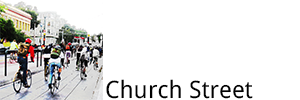
<style>
.page{position:relative;width:300px;height:100px;background:#ffffff}
.page>*{position:absolute;margin:0}
.t1{font:12px "DroidSans";color:#000000}
</style>
<div class="page">
<p class="t1" style="left:106px;top:79px;width:147px;height:20px">Church Street</p>
</div>
